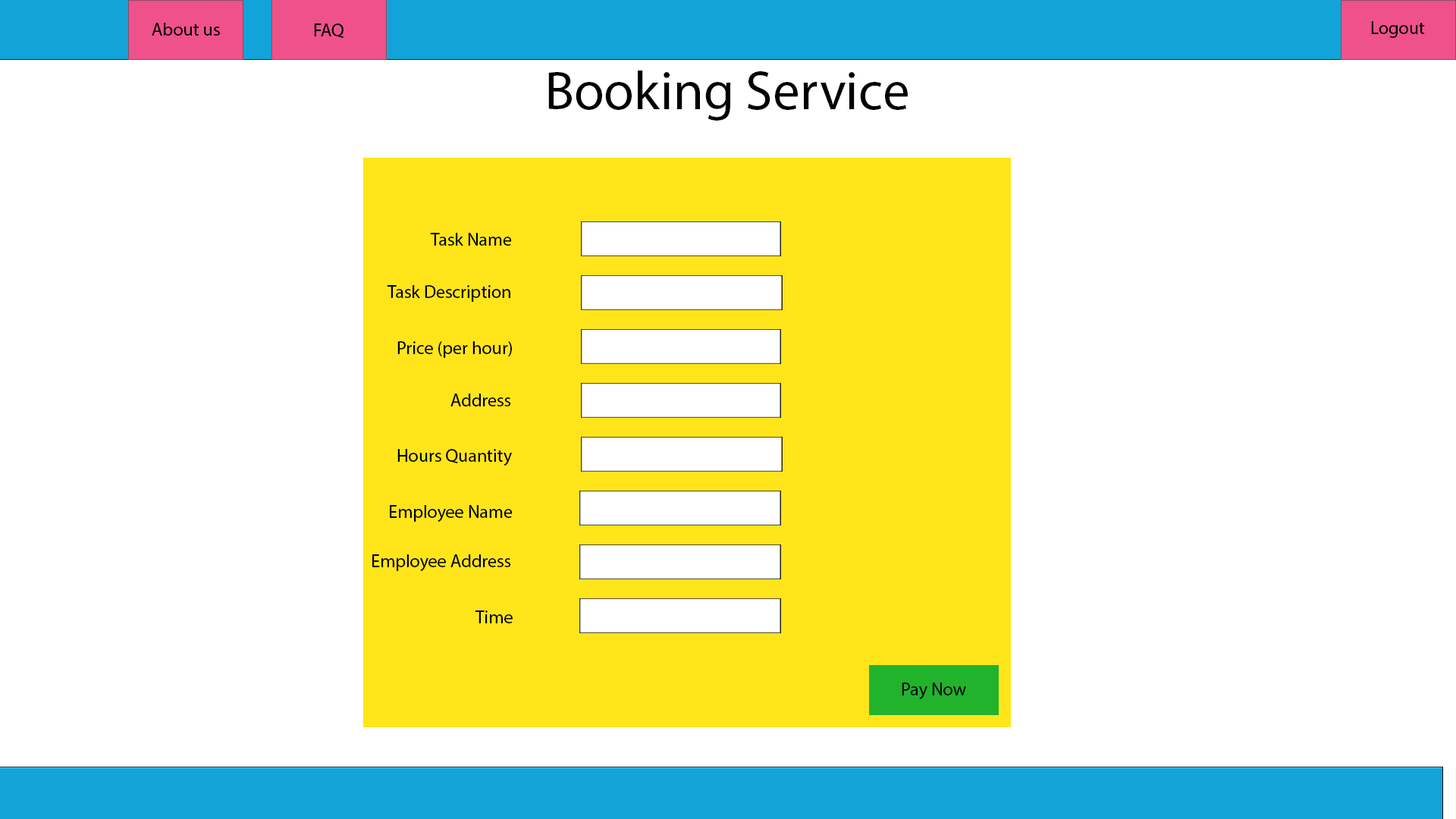
<style>
.page{position:relative;width:1456px;height:819px;background:#ffffff}
.page>*{position:absolute;margin:0}
.t1{font:18.2px "MyriadPro-Regular";color:#000000}
.t2{font:54.6px "MyriadPro-Regular";color:#000000}
</style>
<div class="page">
<p class="t1" style="left:152px;top:23px;width:68px;height:13px">About us</p>
<p class="t1" style="left:314px;top:24px;width:30px;height:14px">FAQ</p>
<p class="t1" style="left:1371px;top:21px;width:54px;height:17px">Logout</p>
<p class="t2" style="left:548px;top:71px;width:360px;height:50px">Booking Service</p>
<p class="t1" style="left:430px;top:233px;width:82px;height:13px">Task Name</p>
<p class="t1" style="left:387px;top:285px;width:123px;height:17px">Task Description</p>
<p class="t1" style="left:397px;top:341px;width:115px;height:17px">Price (per hour)</p>
<p class="t1" style="left:450px;top:394px;width:61px;height:12px">Address</p>
<p class="t1" style="left:397px;top:449px;width:115px;height:17px">Hours Quantity</p>
<p class="t1" style="left:390px;top:505px;width:123px;height:17px">Employee Name</p>
<p class="t1" style="left:372px;top:554px;width:139px;height:17px">Employee Address</p>
<p class="t1" style="left:475px;top:610px;width:38px;height:13px">Time</p>
<p class="t1" style="left:902px;top:682px;width:64px;height:17px">Pay Now</p>
</div>
